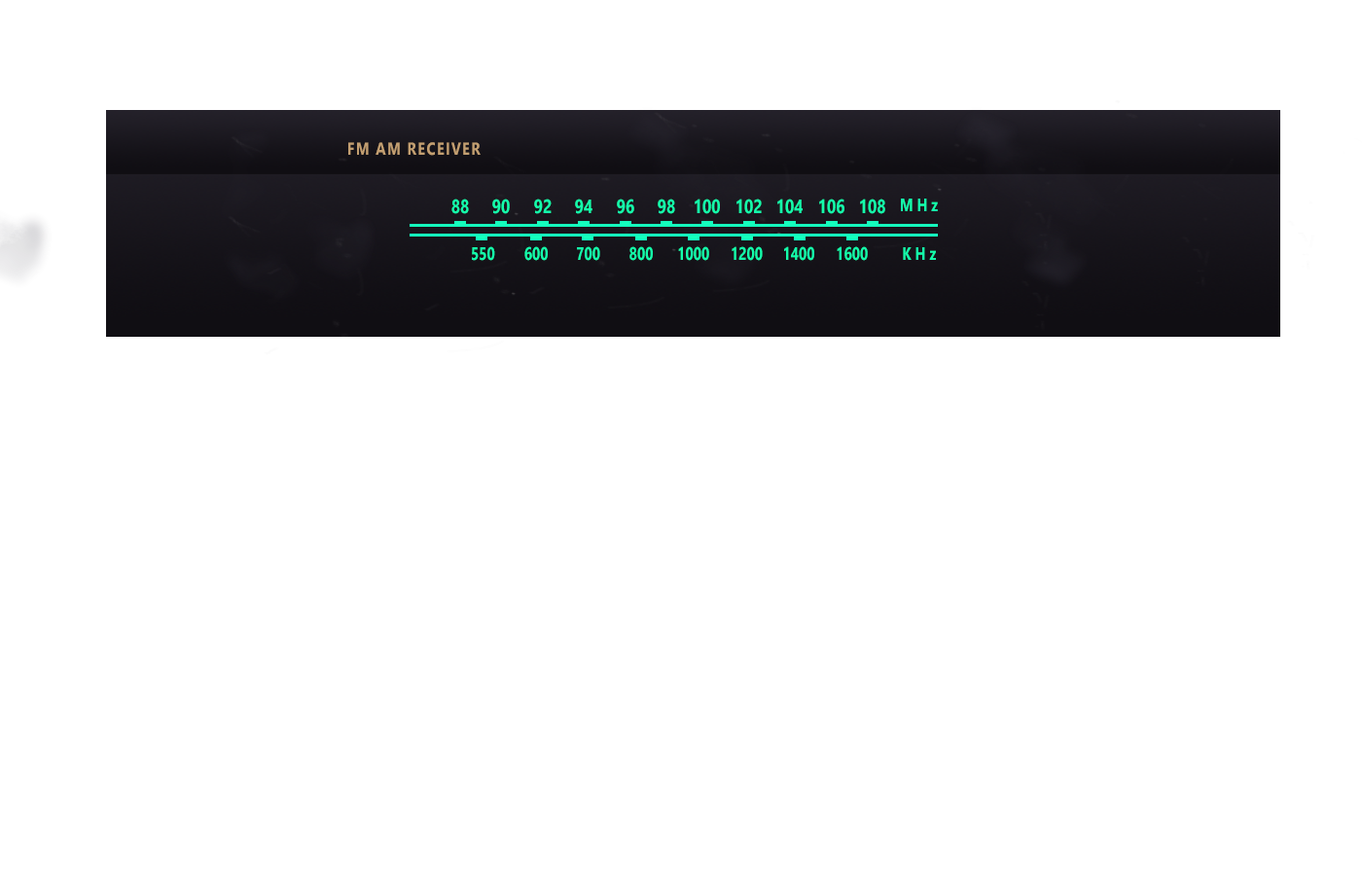
<style>
.page{position:relative;width:1362px;height:876px;background:#ffffff}
.page>*{position:absolute;margin:0}
.t1{font:17.5px "SegoeUI-Bold";letter-spacing:0.1em;color:#c39f71;scale:0.8 1}
.t2{font:19.5px "SegoeUI-Bold";color:#14ffab;scale:0.8 1}
.t3{font:18.1px "SegoeUI-Bold";color:#14ffab;scale:0.77 1}
</style>
<div class="page">
<p class="t1" style="left:348px;top:142px;width:133px;height:14px">FM AM RECEIVER</p>
<p class="t2" style="left:451px;top:198px;width:18px;height:16px">88</p>
<p class="t2" style="left:492px;top:198px;width:18px;height:16px">90</p>
<p class="t2" style="left:534px;top:198px;width:18px;height:16px">92</p>
<p class="t2" style="left:575px;top:198px;width:17px;height:16px">94</p>
<p class="t2" style="left:617px;top:198px;width:17px;height:16px">96</p>
<p class="t2" style="left:658px;top:198px;width:17px;height:16px">98</p>
<p class="t2" style="left:695px;top:198px;width:25px;height:16px">100</p>
<p class="t2" style="left:736px;top:198px;width:26px;height:16px">102</p>
<p class="t2" style="left:777px;top:198px;width:26px;height:16px">104</p>
<p class="t2" style="left:819px;top:198px;width:25px;height:16px">106</p>
<p class="t2" style="left:860px;top:198px;width:25px;height:16px">108</p>
<p class="t3" style="left:901px;top:198px;width:37px;height:13px">M H z</p>
<p class="t3" style="left:472px;top:246px;width:23px;height:15px">550</p>
<p class="t3" style="left:524px;top:246px;width:24px;height:15px">600</p>
<p class="t3" style="left:577px;top:246px;width:23px;height:15px">700</p>
<p class="t3" style="left:629px;top:246px;width:24px;height:15px">800</p>
<p class="t3" style="left:678px;top:246px;width:31px;height:15px">1000</p>
<p class="t3" style="left:732px;top:246px;width:31px;height:15px">1200</p>
<p class="t3" style="left:784px;top:246px;width:30px;height:15px">1400</p>
<p class="t3" style="left:837px;top:246px;width:31px;height:15px">1600</p>
<p class="t3" style="left:903px;top:247px;width:33px;height:13px">K H z</p>
</div>
